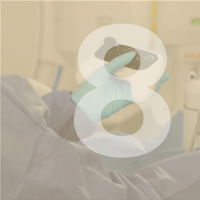
<style>
.page{position:relative;width:200px;height:200px}
.page>*{position:absolute;margin:0}
.t1{font:187.5px "PostGrotesk-Bold";color:#d7d8cb}
</style>
<div class="page">
<p class="t1" style="left:73px;top:23px;width:98px;height:135px">8</p>
</div>
